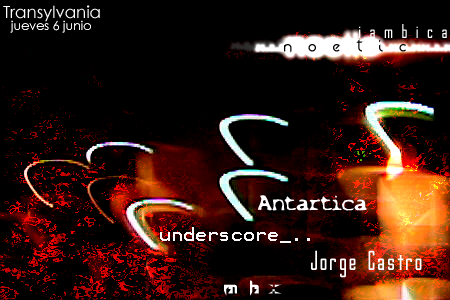
<style>
.page{position:relative;width:450px;height:300px;background:#000000}
.page>*{position:absolute;margin:0}
.t1{font:16.7px "CenturyGothic";color:#ffffff}
.t2{font:12.5px "CenturyGothic";color:#ffffff}
.t3{font:18px "GothamNightsNormal";color:#ffffff}
.t4{font:25px "Frazzed";color:#000000}
.t5{font:20px "X-Files-Regular";color:#fffdfd}
.t6{font:16px "Terminal";color:#f8f6f6}
.t7{font:24px "GothamNightsNormal";color:#ffffff}
.t8{font:25px "Sprutfest";color:#ffffff}
</style>
<div class="page">
<p class="t1" style="left:3px;top:5px;width:97px;height:17px">Transylvania</p>
<p class="t2" style="left:10px;top:20px;width:81px;height:13px">jueves 6 junio</p>
<p class="t3" style="left:359px;top:24px;width:88px;height:14px">i a m b i c a</p>
<p class="t4" style="left:284px;top:39px;width:122px;height:14px">n  o  e  t  i  c</p>
<p class="t5" style="left:258px;top:195px;width:109px;height:16px">Antartica</p>
<p class="t6" style="left:160px;top:227px;width:150px;height:16px">underscore_..</p>
<p class="t7" style="left:311px;top:250px;width:111px;height:28px">Jorge Castro</p>
<p class="t8" style="left:224px;top:280px;width:58px;height:16px">m h x</p>
</div>
